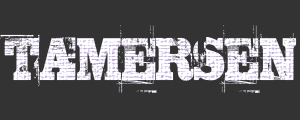
<style>
.page{position:relative;width:300px;height:120px;background:#333333}
.page>*{position:absolute;margin:0}
.t1{font:61px "TRASHED";color:#ffffff;font-variant:small-caps}
</style>
<div class="page">
<p class="t1" style="left:0px;top:25px;width:297px;height:68px">tamersen</p>
</div>
